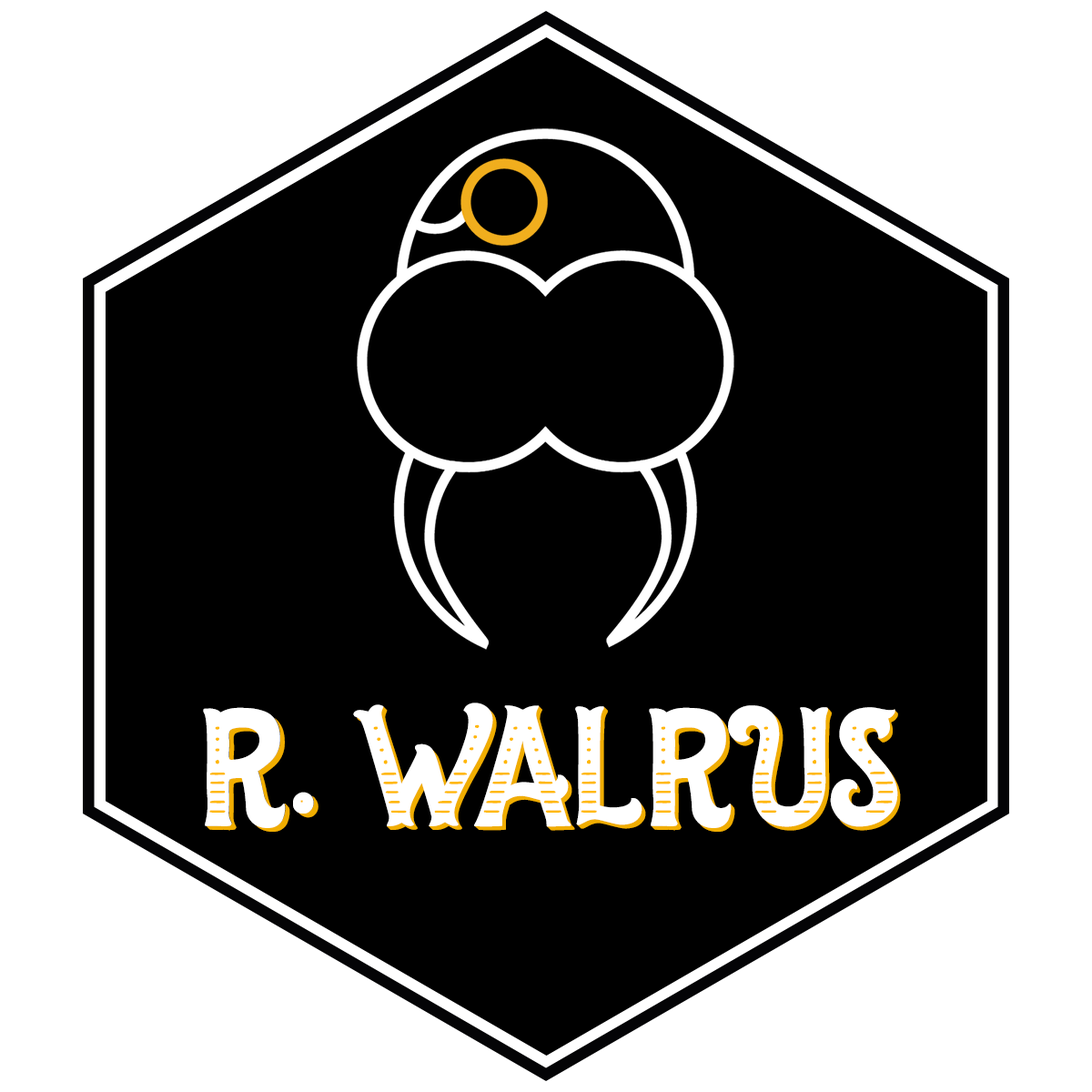
<style>
.page{position:relative;width:1092px;height:1092px;background:#000000}
.page>*{position:absolute;margin:0}
.t1{font:125.1px "TheSalvador-Serif";color:#ffffff;text-transform:uppercase}
.t2{font:125.1px "TheSalvador-Serif";letter-spacing:-0.14em;color:#ffffff;text-transform:uppercase}
.t3{font:125.1px "TheSalvador-Serif";letter-spacing:0.02em;color:#ffffff;text-transform:uppercase}
.t4{font:125.1px "TheSalvador-Serif";letter-spacing:0.04em;color:#ffffff;text-transform:uppercase}
</style>
<div class="page">
<p class="t1" style="left:203px;top:703px;width:695px;height:125px">R. <span class="t2">W</span><span class="t3">a</span>l<span class="t4">ru</span>s</p>
</div>
